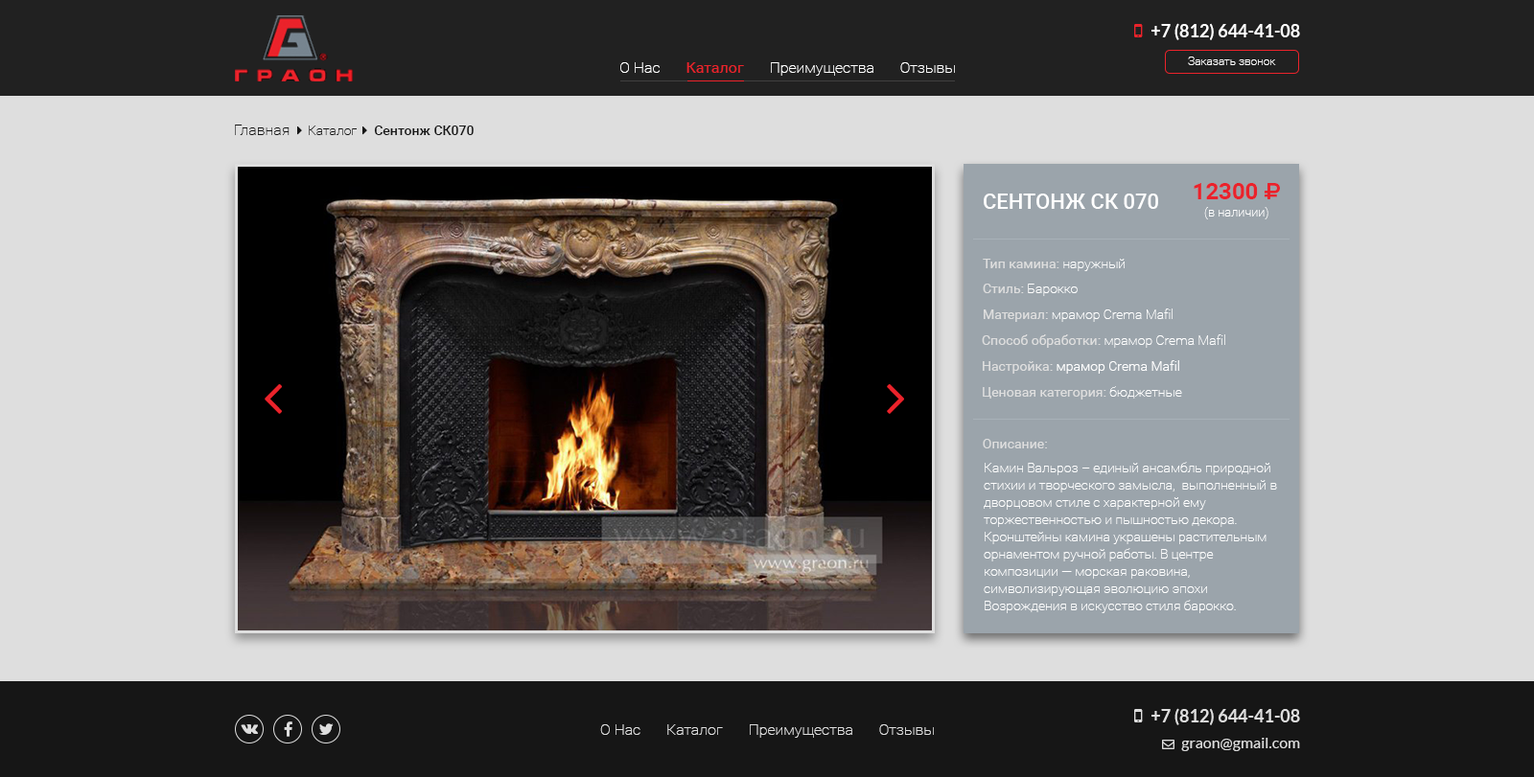
<style>
.page{position:relative;width:1534px;height:777px;background:#dedede}
.page>*{position:absolute;margin:0}
.t1{font:17.3px "Lato-Bold";color:#ffffff}
.t2{font:15.3px "Roboto-Thin";color:#ffffff}
.t3{font:15.3px "Roboto-Regular";color:#eb232b}
.t4{font:11.5px "Roboto-Thin";color:#ffffff}
.t5{font:23px "Roboto-Bold";color:#ea222b;text-transform:uppercase}
.t6{font:21.1px "Roboto-Medium";color:#ffffff;text-transform:uppercase}
.t7{font:12.5px "Roboto-Thin";color:#ffffff}
.t8{font:13.4px "Roboto-Regular";color:#dedede}
.t9{font:13.4px "Roboto-Thin";color:#ffffff}
.t10{font:13.4px "Roboto-Light";color:#ffffff}
.t11{font:13.4px/17.3px "Roboto-Thin";color:#ffffff}
.t12{font:17.3px "Lato-Bold";color:#dedede}
.t13{font:15.3px "Roboto-Thin";color:#dedede}
.t14{font:15.3px "Lato-Regular";color:#dedede}
</style>
<div class="page">
<p class="t1" style="left:1151px;top:23px;width:149px;height:17px">+7 (812) 644-41-08</p>
<p class="t2" style="left:620px;top:62px;width:335px;height:14px">О Нас       <span class="t3">Каталог</span>       Преимущества       Отзывы</p>
<p class="t4" style="left:1188px;top:57px;width:88px;height:8px">Заказать звонок</p>
<p class="t5" style="left:1193px;top:183px;width:65px;height:16px">12300</p>
<p class="t6" style="left:984px;top:194px;width:174px;height:15px">СЕНТОНЖ СК 070</p>
<p class="t7" style="left:1204px;top:207px;width:64px;height:13px">(в наличии)</p>
<p class="t8" style="left:983px;top:259px;width:141px;height:12px">Тип камина: <span class="t9">наружный</span></p>
<p class="t9" style="left:983px;top:284px;width:94px;height:12px"><span class="t8">Стиль: </span>Барокко</p>
<p class="t9" style="left:984px;top:309px;width:188px;height:13px"><span class="t8">Материал: </span>мрамор Crema Mafil</p>
<p class="t9" style="left:982px;top:335px;width:243px;height:13px"><span class="t8">Способ обработки: </span>мрамор Crema Mafil</p>
<p class="t10" style="left:983px;top:360px;width:196px;height:14px"><span class="t8">Настройка:</span> мрамор Crema Mafil</p>
<p class="t8" style="left:983px;top:386px;width:199px;height:14px">Ценовая категория: <span class="t9">бюджетные</span></p>
<p class="t8" style="left:983px;top:439px;width:64px;height:10px">Описание:</p>
<p class="t11" style="left:984px;top:462px;width:293px;height:152px">Камин Вальроз – единый ансамбль природной стихии и творческого замысла,  выполненный в дворцовом стиле с характерной ему торжественностью и пышностью декора. Кронштейны камина украшены растительным орнаментом ручной работы. В центре композиции — морская раковина, символизирующая эволюцию эпохи Возрождения в искусство стиля барокко.</p>
<p class="t12" style="left:1151px;top:708px;width:149px;height:18px">+7 (812) 644-41-08</p>
<p class="t13" style="left:600px;top:725px;width:334px;height:13px">О Нас       Каталог       Преимущества       Отзывы</p>
<p class="t14" style="left:1181px;top:738px;width:119px;height:14px">graon@gmail.com</p>
</div>
